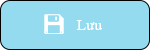
<style>
.page{position:relative;width:150px;height:50px;background:#94dbf0}
.page>*{position:absolute;margin:0}
.t1{font:15.3px "TimesNewRomanPSMT";color:#fefefe}
</style>
<div class="page">
<p class="t1" style="left:76px;top:20px;width:26px;height:10px">Lưu</p>
</div>
